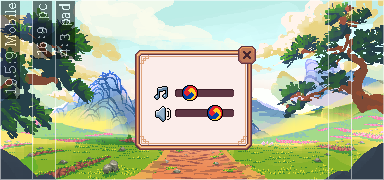
<style>
.page{position:relative;width:384px;height:180px}
.page>*{position:absolute;margin:0}
.t1{font:14px "AdobeMyungjoStd-Medium"}
.t2{font:15px "D2Codingligature"}
</style>
<div class="page">
<p class="t1" style="left:4px;top:3px;width:13px;height:90px;rotate:-90deg">19.5:9 Mobile</p>
<p class="t2" style="left:37px;top:4px;width:12px;height:51px;rotate:-90deg">16:9 pc</p>
<p class="t2" style="left:59px;top:4px;width:13px;height:52px;rotate:-90deg">4:3 pad</p>
</div>
